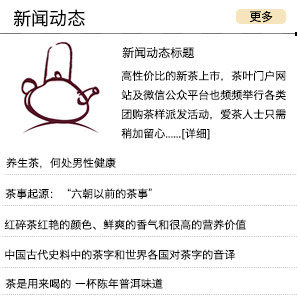
<style>
.page{position:relative;width:297px;height:300px;background:#ffffff}
.page>*{position:absolute;margin:0}
.t1{font:18px "HiraginoSansGB-W3";color:#040404}
.t2{font:12px "HiraginoSansGB-W3";color:#040404}
.t3{font:11px "HiraginoSansGB-W3";color:#040404}
</style>
<div class="page">
<p class="t1" style="left:13px;top:9px;width:72px;height:18px">新闻动态</p>
<p class="t2" style="left:250px;top:11px;width:23px;height:12px">更多</p>
<p class="t2" style="left:122px;top:47px;width:73px;height:12px">新闻动态标题</p>
<p class="t3" style="left:121px;top:70px;width:165px;height:70px">高性价比的新茶上市，茶叶门户网<br>站及微信公众平台也频频举行各类<br>团购茶样派发活动，爱茶人士只需<br>稍加留心......[详细]</p>
<p class="t3" style="left:6px;top:157px;width:110px;height:12px">养生茶，何处男性健康</p>
<p class="t3" style="left:5px;top:188px;width:147px;height:11px">茶事起源：“六朝以前的茶事”</p>
<p class="t3" style="left:4px;top:219px;width:242px;height:11px">红碎茶红艳的颜色、鲜爽的香气和很高的营养价值</p>
<p class="t3" style="left:5px;top:249px;width:230px;height:11px">中国古代史料中的茶字和世界各国对茶字的音译</p>
<p class="t3" style="left:5px;top:278px;width:158px;height:11px">茶是用来喝的 一杯陈年普洱味道</p>
</div>
